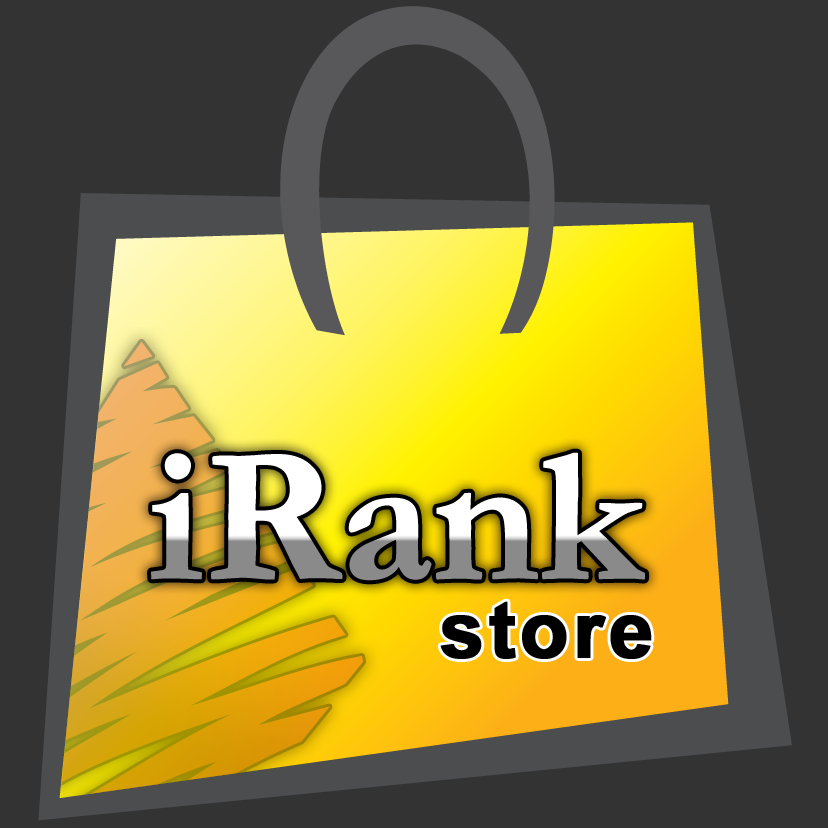
<style>
.page{position:relative;width:828px;height:828px;background:#333333}
.page>*{position:absolute;margin:0}
.t1{font:193.7px "Garamond-Bold";letter-spacing:-0.025em;font-weight:bold}
.t2{font:78.9px "Arial-BoldMT";letter-spacing:0.035em;color:#000000;font-weight:bold}
</style>
<div class="page">
<p class="t1" style="left:151px;top:452px;width:494px;height:129px">iRank</p>
<p class="t2" style="left:440px;top:601px;width:212px;height:58px">store</p>
</div>
